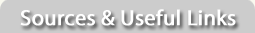
<style>
.page{position:relative;width:255px;height:33px;background:#cccccc}
.page>*{position:absolute;margin:0}
.t1{font:22px "MyriadPro-Regular";color:#ffffff;font-weight:bold}
</style>
<div class="page">
<p class="t1" style="left:20px;top:9px;width:216px;height:17px">Sources &amp; Useful Links</p>
</div>
